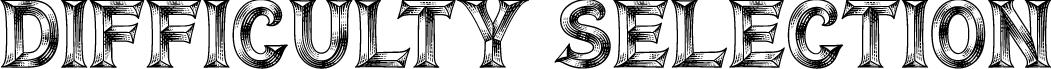
<style>
.page{position:relative;width:1051px;height:69px;background:#ffffff}
.page>*{position:absolute;margin:0}
.t1{font:97px "BiteHard";color:#000000;scale:1.03 1}
</style>
<div class="page">
<p class="t1" style="left:0px;top:0px;width:1051px;height:69px">Difficulty Selection</p>
</div>
